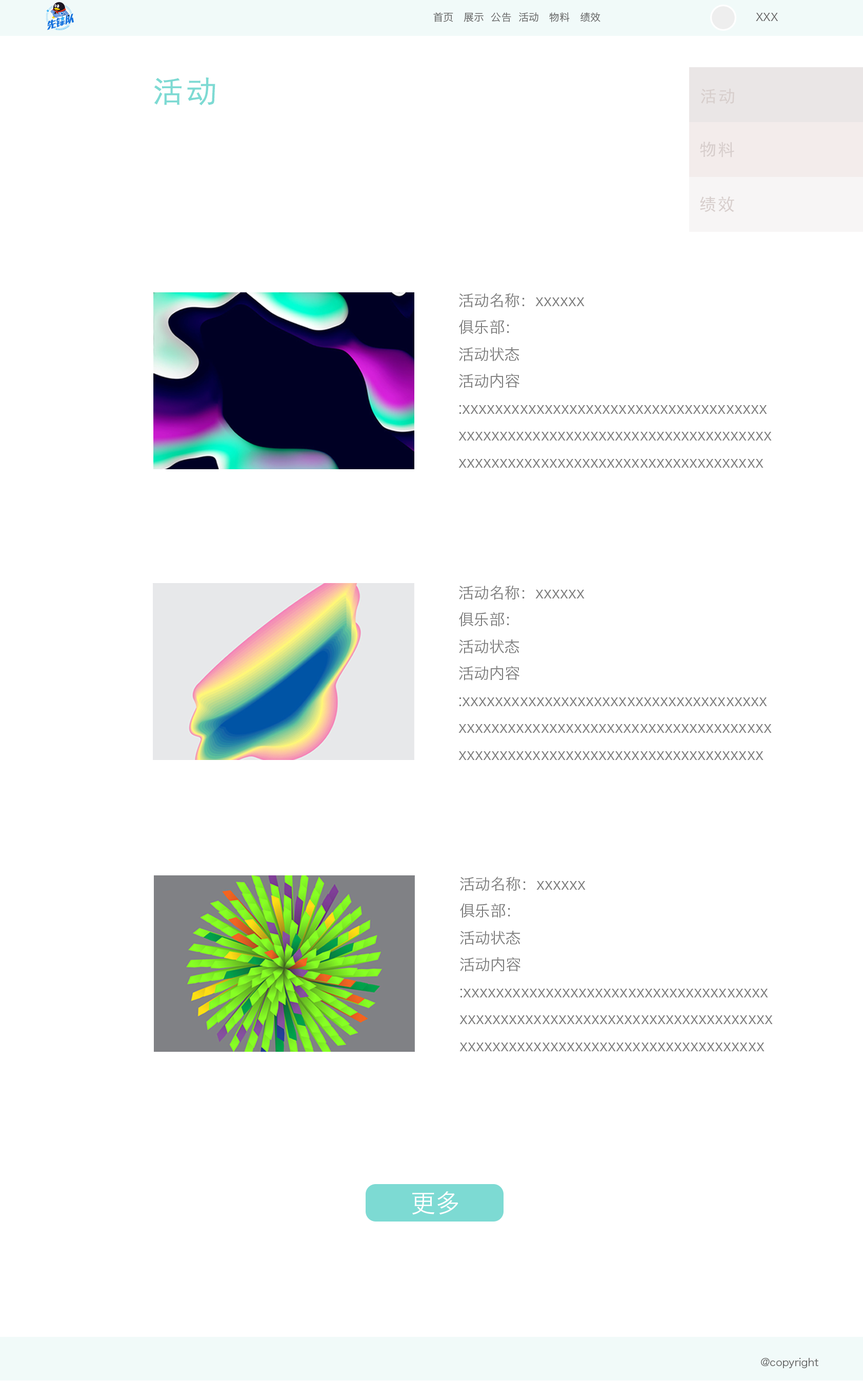
<style>
.page{position:relative;width:863px;height:1381px;background:#ffffff}
.page>*{position:absolute;margin:0}
.t1{font:10.3px "HiraginoSansGB-W3";color:#656565}
.t2{font:10.3px "MicrosoftYaHei";color:#656565}
.t3{font:30.8px "SimHei";letter-spacing:0.1em;color:#7ddad3}
.t4{font:16.8px "SimHei";letter-spacing:0.1em;color:#d7cecc}
.t5{font:15.4px "HiraginoSansGB-W3";color:#7b7b7b}
.t6{font:24.6px "HiraginoSansGB-W3";color:#ffffff}
</style>
<div class="page">
<p class="t1" style="left:433px;top:12px;width:168px;height:10px"><span class="t2"> </span>首页   展示  公告  活动   物料   绩效</p>
<p class="t1" style="left:756px;top:13px;width:22px;height:8px">XXX</p>
<p class="t3" style="left:154px;top:77px;width:61px;height:29px">活动</p>
<p class="t4" style="left:701px;top:88px;width:34px;height:16px">活动</p>
<p class="t4" style="left:700px;top:142px;width:35px;height:15px">物料</p>
<p class="t4" style="left:700px;top:196px;width:35px;height:16px">绩效</p>
<p class="t5" style="left:459px;top:293px;width:313px;height:175px">活动名称：xxxxxx<br>俱乐部：<br>活动状态<br>活动内容:xxxxxxxxxxxxxxxxxxxxxxxxxxxxxxxxxxxxxxxxxxxxxxxxxxxxxxxxxxxxxxxxxxxxxxxxxxxxxxxxxxxxxxxxxxxxxxxxxxxxxxxxxxxxxxxx</p>
<p class="t5" style="left:459px;top:585px;width:313px;height:175px">活动名称：xxxxxx<br>俱乐部：<br>活动状态<br>活动内容:xxxxxxxxxxxxxxxxxxxxxxxxxxxxxxxxxxxxxxxxxxxxxxxxxxxxxxxxxxxxxxxxxxxxxxxxxxxxxxxxxxxxxxxxxxxxxxxxxxxxxxxxxxxxxxxx</p>
<p class="t5" style="left:460px;top:877px;width:313px;height:175px">活动名称：xxxxxx<br>俱乐部：<br>活动状态<br>活动内容:xxxxxxxxxxxxxxxxxxxxxxxxxxxxxxxxxxxxxxxxxxxxxxxxxxxxxxxxxxxxxxxxxxxxxxxxxxxxxxxxxxxxxxxxxxxxxxxxxxxxxxxxxxxxxxxx</p>
<p class="t6" style="left:412px;top:1192px;width:47px;height:23px">更多</p>
<p class="t1" style="left:761px;top:1358px;width:58px;height:10px">@copyright</p>
</div>
